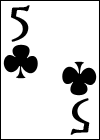
<style>
.page{position:relative;width:100px;height:140px;background:#ffffff}
.page>*{position:absolute;margin:0}
.t1{font:60px "HighTowerText-Reg";color:#000000}
</style>
<div class="page">
<p class="t1" style="left:11px;top:5px;width:19px;height:37px">5</p>
<p class="t1" style="left:70px;top:98px;width:20px;height:37px;rotate:180deg">5</p>
</div>
